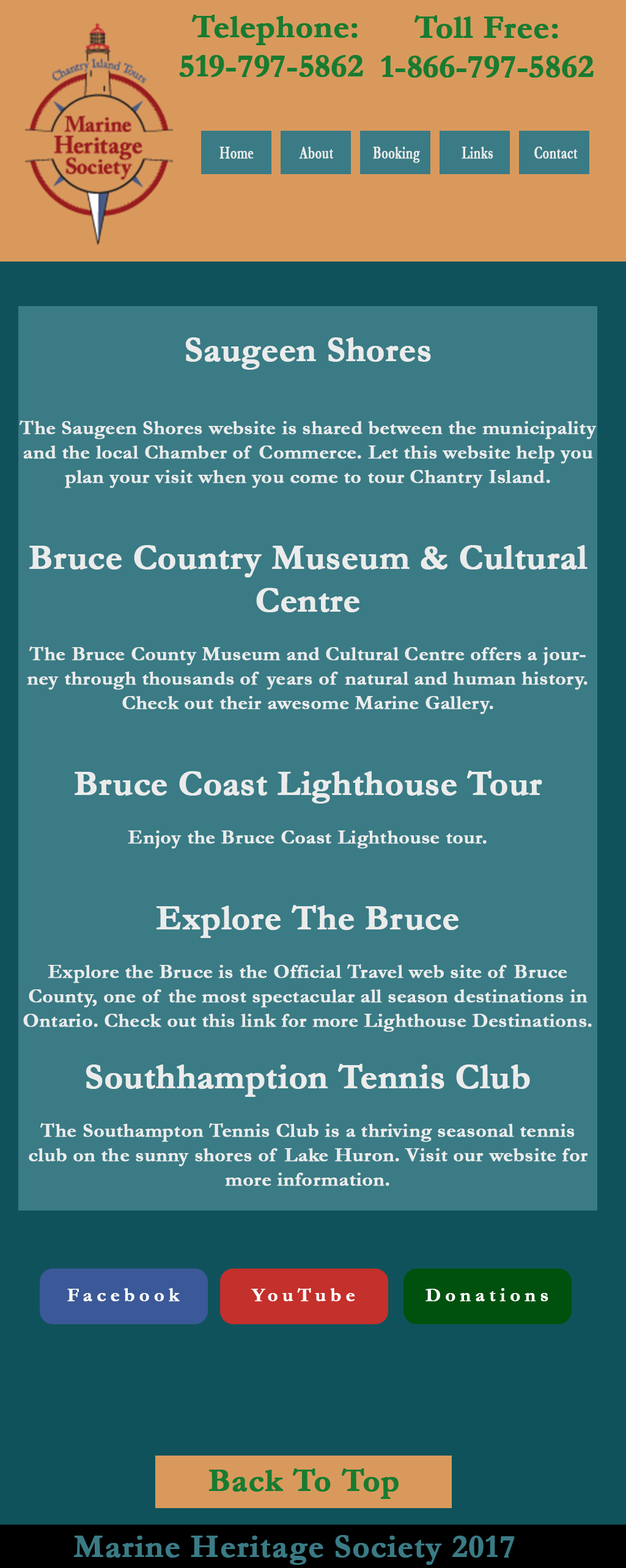
<style>
.page{position:relative;width:626px;height:1568px;background:#3a7b85}
.page>*{position:absolute;margin:0}
.t1{font:32.7px "Garamond-Bold";letter-spacing:-0.01em;color:#197b30;font-weight:bold}
.t2{font:32.7px "Garamond-Bold";color:#197b30;font-weight:bold}
.t3{font:17.5px "Garamond-Bold";color:#ebebeb;font-weight:bold;scale:0.69 1}
.t4{font:20.4px "Garamond-Bold";letter-spacing:-0.005em;color:#ebebeb;font-weight:bold}
.t5{font:17.8px "Garamond-Bold";letter-spacing:-0.005em;color:#ebebeb;font-weight:bold}
.t6{font:35.6px "Garamond-Bold";letter-spacing:-0.005em;color:#ebebeb;font-weight:bold}
.t7{font:15.3px "Garamond-Bold";letter-spacing:-0.005em;color:#ebebeb;font-weight:bold}
.t8{font:19.3px "Garamond-Bold";letter-spacing:0.2em;color:#fefefe;font-weight:bold}
.t9{font:19.3px "Garamond-Bold";letter-spacing:0.2em;color:#ffffff;font-weight:bold}
.t10{font:32.7px "Garamond-Bold";color:#3a7b85;font-weight:bold}
</style>
<div class="page">
<p class="t1" style="left:179px;top:15px;width:184px;height:62px;text-align:center"><span class="t2">Telephone:<br></span>519-797-5862</p>
<p class="t1" style="left:381px;top:15px;width:212px;height:63px;text-align:center"><span class="t2">Toll Free:<br></span>1-866-797-5862</p>
<p class="t3" style="left:219px;top:147px;width:35px;height:12px">Home</p>
<p class="t3" style="left:299px;top:147px;width:34px;height:12px">About</p>
<p class="t3" style="left:373px;top:147px;width:47px;height:16px">Booking</p>
<p class="t3" style="left:461px;top:147px;width:32px;height:12px">Links</p>
<p class="t3" style="left:534px;top:147px;width:43px;height:12px">Contact</p>
<p class="t4" style="left:20px;top:337px;width:576px;height:849px;text-align:center"><span class="t5"><br></span><span class="t6">Saugeen Shores<br></span><br><br>The Saugeen Shores website is shared between the municipality and the local Chamber of Commerce. Let this website help you plan your visit when you come to tour Chantry Island.<br><span class="t6"><br>Bruce Country Museum &amp; Cultural Centre<br></span><br>The Bruce County Museum and Cultural Centre offers a journey through thousands of years of natural and human history. Check out their awesome Marine Gallery.<span class="t6"><br><br>Bruce Coast Lighthouse Tour<br></span><br>Enjoy the Bruce Coast Lighthouse tour.<span class="t6"><br><br>Explore The Bruce<br></span><br>Explore the Bruce is the Official Travel web site of Bruce County, one of the most spectacular all season destinations in Ontario. Check out this link for more Lighthouse Destinations.<br><span class="t7"><br></span><span class="t6">Southhamption Tennis Club<br></span><br>The Southampton Tennis Club is a thriving seasonal tennis club on the sunny shores of Lake Huron. Visit our website for more information.</p>
<p class="t8" style="left:67px;top:1288px;width:113px;height:14px">Facebook</p>
<p class="t9" style="left:251px;top:1288px;width:104px;height:14px">YouTube</p>
<p class="t9" style="left:425px;top:1288px;width:123px;height:14px">Donations</p>
<p class="t2" style="left:208px;top:1468px;width:190px;height:31px">Back To Top</p>
<p class="t10" style="left:74px;top:1535px;width:441px;height:30px">Marine Heritage Society 2017</p>
</div>
